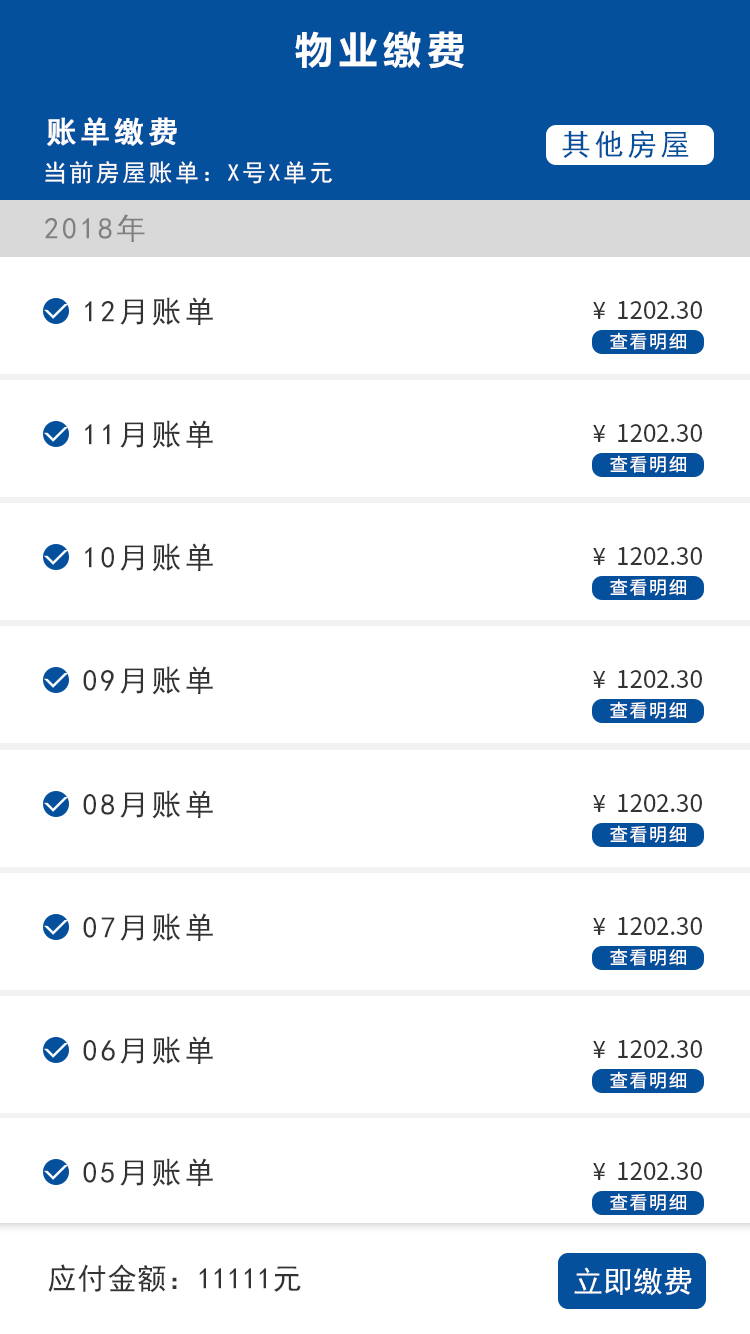
<style>
.page{position:relative;width:750px;height:1334px;background:#ffffff}
.page>*{position:absolute;margin:0}
.t1{font:40px "FZLTCHJW--GB1-0";letter-spacing:0.1em;color:#fefefe;text-transform:uppercase}
.t2{font:30px "SimHei";letter-spacing:0.1em;color:#fefefe;font-weight:bold}
.t3{font:30px "SimHei";letter-spacing:0.1em;color:#05509d}
.t4{font:24px "SimHei";letter-spacing:0.1em;color:#fefefe;text-transform:uppercase}
.t5{font:30px "SimHei";letter-spacing:0.1em;color:#808080}
.t6{font:30px "SimHei";letter-spacing:0.1em;color:#333333}
.t7{font:24px "SourceHanSansSC-Regular";color:#333333}
.t8{font:24px "SourceHanSansSC-Regular";letter-spacing:0.1em;color:#333333}
.t9{font:18px "SourceHanSansSC-Regular";letter-spacing:0.1em;color:#ffffff}
.t10{font:30px "SimHei";color:#333333}
.t11{font:30px "SimHei";color:#ffffff}
</style>
<div class="page">
<p class="t1" style="left:295px;top:31px;width:169px;height:38px">物业缴费</p>
<p class="t2" style="left:47px;top:117px;width:130px;height:29px">账单缴费</p>
<p class="t3" style="left:562px;top:130px;width:127px;height:29px">其他房屋</p>
<p class="t4" style="left:45px;top:161px;width:287px;height:23px">当前房屋账单：X号X单元</p>
<p class="t5" style="left:45px;top:214px;width:100px;height:28px">2018年</p>
<p class="t6" style="left:85px;top:297px;width:128px;height:29px">12月账单</p>
<p class="t7" style="left:593px;top:301px;width:109px;height:18px"><span class="t8">¥ </span>1202.30</p>
<p class="t9" style="left:610px;top:332px;width:76px;height:18px">查看明细</p>
<p class="t6" style="left:85px;top:420px;width:128px;height:29px">11月账单</p>
<p class="t7" style="left:593px;top:424px;width:109px;height:18px"><span class="t8">¥ </span>1202.30</p>
<p class="t9" style="left:610px;top:455px;width:76px;height:18px">查看明细</p>
<p class="t6" style="left:85px;top:543px;width:128px;height:29px">10月账单</p>
<p class="t7" style="left:593px;top:547px;width:109px;height:18px"><span class="t8">¥ </span>1202.30</p>
<p class="t9" style="left:610px;top:578px;width:76px;height:18px">查看明细</p>
<p class="t6" style="left:83px;top:666px;width:130px;height:29px">09月账单</p>
<p class="t7" style="left:593px;top:670px;width:109px;height:18px"><span class="t8">¥ </span>1202.30</p>
<p class="t9" style="left:610px;top:701px;width:76px;height:18px">查看明细</p>
<p class="t6" style="left:83px;top:790px;width:130px;height:29px">08月账单</p>
<p class="t7" style="left:593px;top:794px;width:109px;height:18px"><span class="t8">¥ </span>1202.30</p>
<p class="t9" style="left:610px;top:825px;width:76px;height:18px">查看明细</p>
<p class="t6" style="left:83px;top:913px;width:130px;height:29px">07月账单</p>
<p class="t7" style="left:593px;top:917px;width:109px;height:18px"><span class="t8">¥ </span>1202.30</p>
<p class="t9" style="left:610px;top:948px;width:76px;height:18px">查看明细</p>
<p class="t6" style="left:83px;top:1036px;width:130px;height:29px">06月账单</p>
<p class="t7" style="left:593px;top:1040px;width:109px;height:18px"><span class="t8">¥ </span>1202.30</p>
<p class="t9" style="left:610px;top:1071px;width:76px;height:18px">查看明细</p>
<p class="t6" style="left:83px;top:1158px;width:130px;height:29px">05月账单</p>
<p class="t7" style="left:593px;top:1162px;width:109px;height:18px"><span class="t8">¥ </span>1202.30</p>
<p class="t9" style="left:610px;top:1193px;width:76px;height:18px">查看明细</p>
<p class="t10" style="left:48px;top:1264px;width:253px;height:28px">应付金额：11111元</p>
<p class="t11" style="left:574px;top:1267px;width:118px;height:29px">立即缴费</p>
</div>
